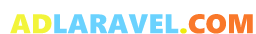
<style>
.page{position:relative;width:256px;height:34px;background:#ffffff}
.page>*{position:absolute;margin:0}
.t1{font:26.9px "SegoeUIBlack";color:#6ad2fe;scale:1.04 1}
.t2{font:26.9px "SegoeUIBlack";color:#f2f43a;scale:1.04 1}
.t3{font:26.9px "SegoeUIBlack";color:#efec0c;scale:1.04 1}
.t4{font:26.9px "SegoeUIBlack";color:#f9782a;scale:1.04 1}
</style>
<div class="page">
<p class="t1" style="left:10px;top:14px;width:243px;height:20px"><span class="t2">AD</span>LARAVEL<span class="t3">.</span><span class="t4">COM</span></p>
</div>
